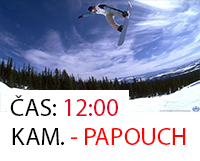
<style>
.page{position:relative;width:200px;height:161px;background:#ffffff}
.page>*{position:absolute;margin:0}
.t1{font:25px "MyriadPro-Regular";color:#df0623}
.t2{font:25px "MyriadPro-Regular";color:#000000}
.t3{font:25px "MyriadPro-Regular";color:#fe0101}
</style>
<div class="page">
<p class="t1" style="left:10px;top:95px;width:108px;height:21px"><span class="t2">ČAS:</span> 12:00</p>
<p class="t3" style="left:12px;top:128px;width:174px;height:17px"><span class="t2">KAM. </span>- PAPOUCH</p>
</div>
